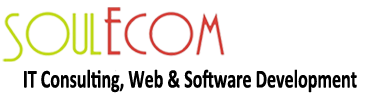
<style>
.page{position:relative;width:380px;height:93px;background:#ffffff}
.page>*{position:absolute;margin:0}
.t1{font:25.9px "Calibri-Bold";color:#000000;scale:0.69 1}
</style>
<div class="page">
<p class="t1" style="left:24px;top:69px;width:333px;height:24px">IT Consulting, Web &amp; Software Development</p>
</div>
